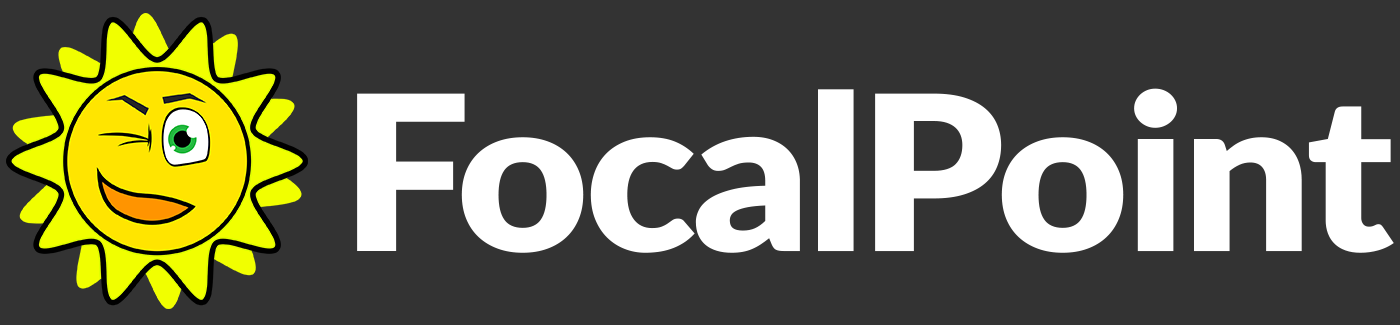
<style>
.page{position:relative;width:1400px;height:325px;background:#333333}
.page>*{position:absolute;margin:0}
.t1{font:215.8px "Lato-Black";letter-spacing:-0.02em;color:#ffffff;scale:1.06 1}
</style>
<div class="page">
<p class="t1" style="left:357px;top:88px;width:1037px;height:165px">FocalPoint</p>
</div>
